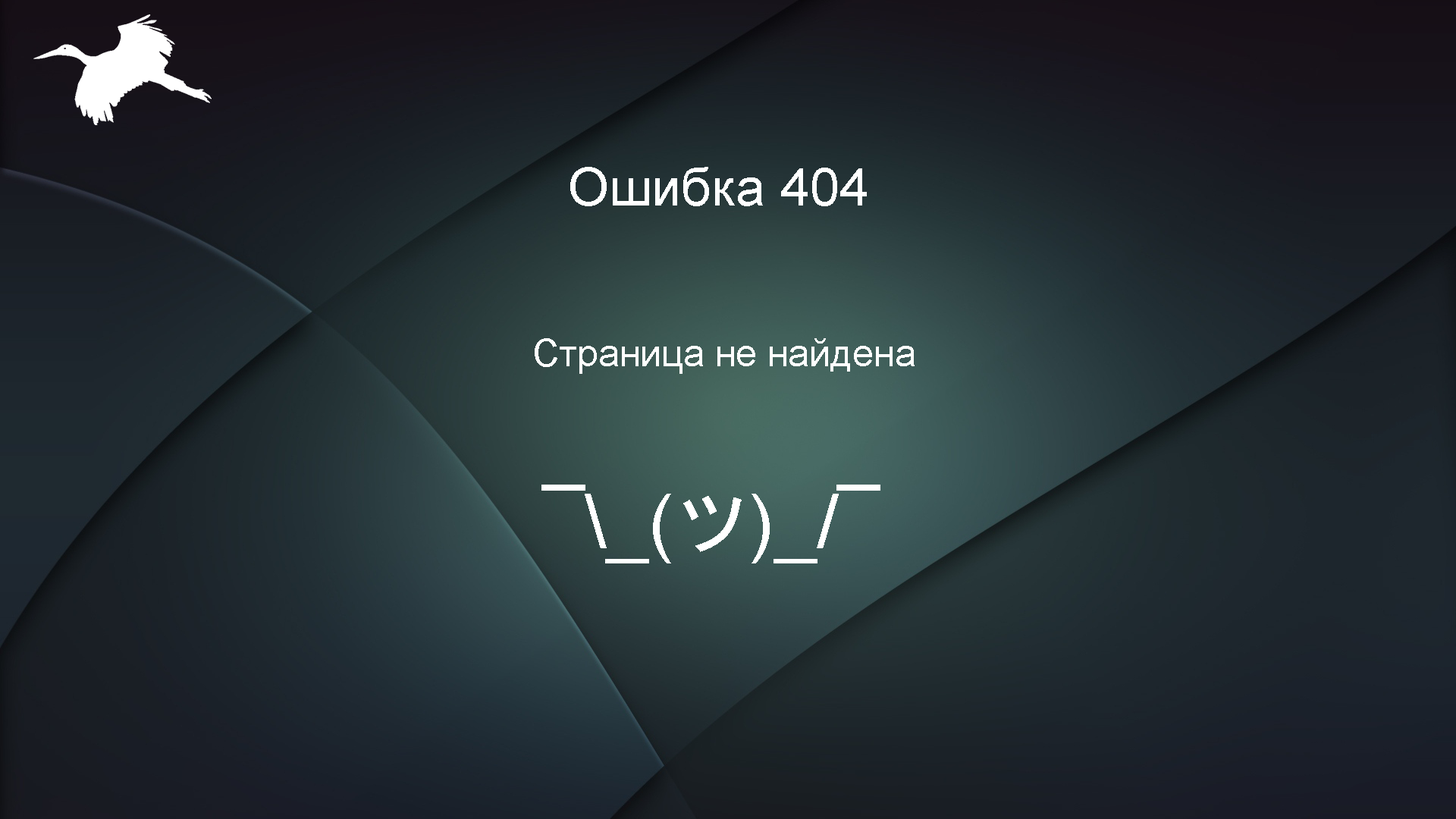
<style>
.page{position:relative;width:1456px;height:819px}
.page>*{position:absolute;margin:0}
.t1{font:53.1px "ArialMT";color:#ffffff}
.t2{font:37.9px "ArialMT";color:#ffffff}
.t3{font:75.8px "ArialMT";color:#ffffff}
.t4{font:75.8px "MS-Gothic";color:#ffffff}
</style>
<div class="page">
<p class="t1" style="left:570px;top:167px;width:297px;height:39px">Ошибка 404</p>
<p class="t2" style="left:535px;top:338px;width:380px;height:225px">Страница не найдена<br><br><br> <span class="t3">¯\_(</span><span class="t4">ツ</span><span class="t3">)_/¯</span></p>
</div>
